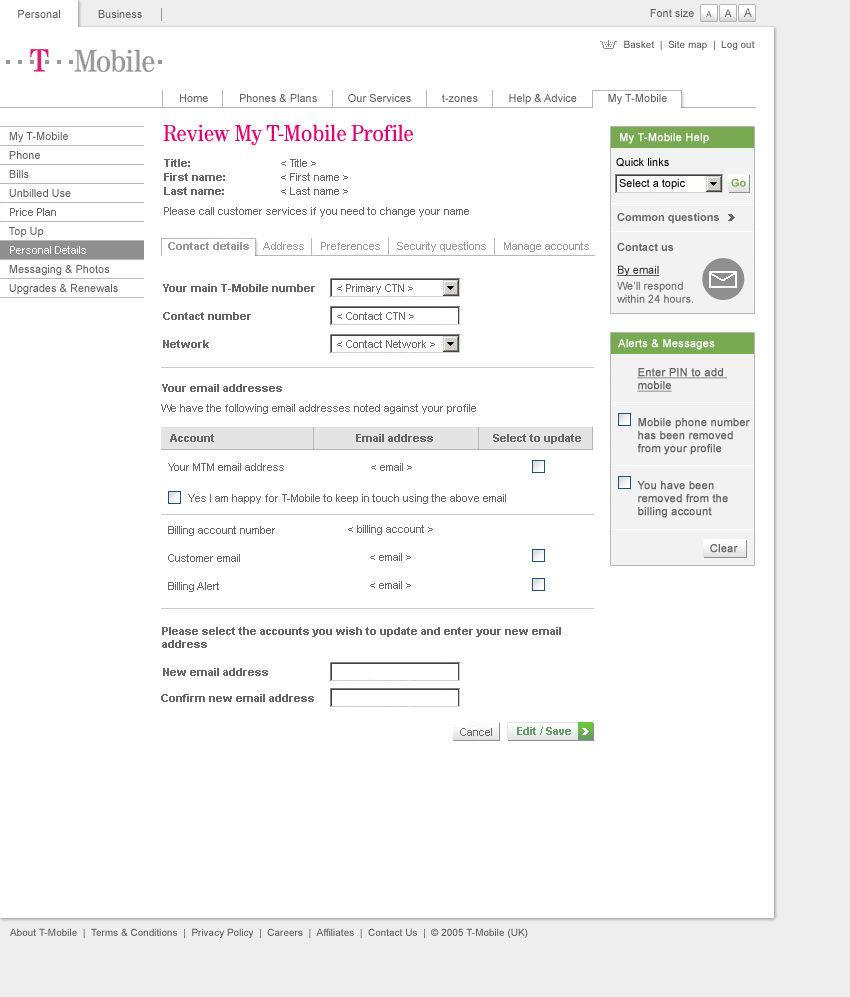
<style>
.page{position:relative;width:850px;height:997px;background:#ffffff}
.page>*{position:absolute;margin:0}
.t1{font:24px "Tele-Antiqua";color:#e20074}
.t2{font:11px/20px "ArialMT";color:#666666}
.t3{font:11px/14px "Arial-BoldMT";color:#666666}
.t4{font:11px/14px "ArialMT";color:#666666}
.t5{font:11px "ArialMT";color:#666666}
.t6{font:11px "ArialMT";color:#ffffff}
.t7{font:11px "Arial-BoldMT";color:#999999}
.t8{font:11px "ArialMT";color:#999999}
.t9{font:11px/28px "Arial-BoldMT";color:#666666}
.t10{font:11px "ArialMT";color:#ffffff;font-weight:bold}
.t11{font:11px "ArialMT";color:#666666;font-weight:bold;text-decoration:underline}
.t12{font:11px "Arial-BoldMT";color:#666666}
.t13{font:11px "ArialMT";color:#666666;font-weight:bold}
.t14{font:11px/28px "ArialMT";color:#666666}
.t15{font:11px "Arial-BoldMT";color:#669b64}
</style>
<div class="page">
<p class="t1" style="left:163px;top:124px;width:250px;height:22px">Review My T-Mobile Profile</p>
<p class="t2" style="left:164px;top:159px;width:305px;height:58px"><span class="t3">Title:<br>First name:<br>Last name:<br></span>Please call customer services if you need to change your name</p>
<p class="t4" style="left:281px;top:159px;width:67px;height:36px">&lt; Title &gt;<br>&lt; First name &gt;<br>&lt; Last name &gt;</p>
<p class="t5" style="left:10px;top:208px;width:46px;height:8px">Price Plan</p>
<p class="t6" style="left:10px;top:246px;width:76px;height:8px">Personal Details</p>
<p class="t7" style="left:168px;top:242px;width:81px;height:8px">Contact details</p>
<p class="t8" style="left:263px;top:242px;width:41px;height:8px">Address</p>
<p class="t8" style="left:321px;top:242px;width:59px;height:8px">Preferences</p>
<p class="t8" style="left:397px;top:242px;width:89px;height:10px">Security questions</p>
<p class="t8" style="left:504px;top:242px;width:85px;height:10px">Manage accounts</p>
<p class="t9" style="left:163px;top:284px;width:152px;height:64px">Your main T-Mobile number<br>Contact number<br>Network</p>
<p class="t5" style="left:337px;top:284px;width:76px;height:10px">&lt; Primary CTN &gt;</p>
<p class="t5" style="left:337px;top:312px;width:77px;height:8px">&lt; Contact CTN &gt;</p>
<p class="t5" style="left:337px;top:340px;width:98px;height:8px">&lt; Contact Network &gt;</p>
<p class="t10" style="left:618px;top:339px;width:97px;height:11px">Alerts &amp; Messages</p>
<p class="t11" style="left:637px;top:368px;width:90px;height:24px">Enter PIN to add <br>mobile</p>
<p class="t12" style="left:162px;top:384px;width:120px;height:8px">Your email addresses</p>
<p class="t5" style="left:161px;top:404px;width:315px;height:10px">We have the following email addresses noted against your profile</p>
<p class="t13" style="left:637px;top:418px;width:113px;height:37px">Mobile phone number <br>has been removed <br>from your profile</p>
<p class="t12" style="left:170px;top:434px;width:44px;height:8px">Account</p>
<p class="t12" style="left:356px;top:434px;width:77px;height:8px">Email address</p>
<p class="t12" style="left:493px;top:434px;width:88px;height:10px">Select to update</p>
<p class="t5" style="left:168px;top:463px;width:116px;height:8px">Your MTM email address</p>
<p class="t5" style="left:371px;top:463px;width:41px;height:8px">&lt; email &gt;</p>
<p class="t13" style="left:637px;top:481px;width:91px;height:37px">You have been <br>removed from the <br>billing account</p>
<p class="t5" style="left:188px;top:494px;width:318px;height:10px">Yes I am happy for T-Mobile to keep in touch using the above email</p>
<p class="t14" style="left:168px;top:526px;width:107px;height:66px">Billing account number<br>Customer email<br>Billing Alert</p>
<p class="t14" style="left:348px;top:525px;width:85px;height:64px;text-align:center">&lt; billing account &gt;<br>&lt; email &gt;<br>&lt; email &gt;</p>
<p class="t13" style="left:710px;top:544px;width:28px;height:9px">Clear</p>
<p class="t12" style="left:162px;top:627px;width:399px;height:21px">Please select the accounts you wish to update and enter your new email <br>address</p>
<p class="t12" style="left:163px;top:668px;width:105px;height:8px">New email address</p>
<p class="t12" style="left:161px;top:694px;width:153px;height:8px">Confirm new email address</p>
<p class="t15" style="left:517px;top:727px;width:54px;height:8px">Edit / Save</p>
</div>
